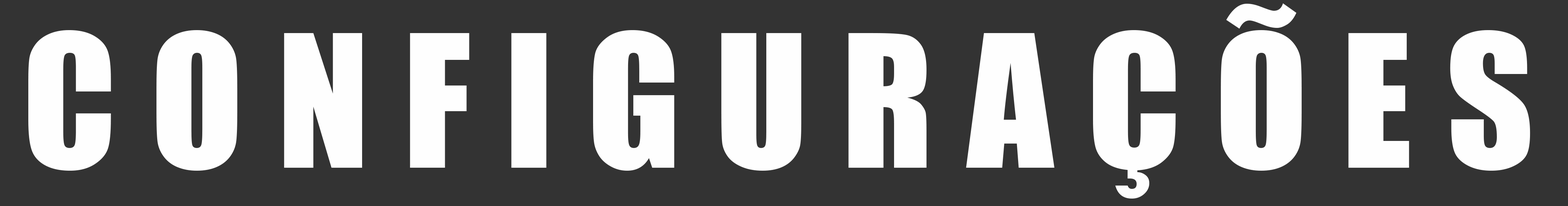
<style>
.page{position:relative;width:1568px;height:206px;background:#333333}
.page>*{position:absolute;margin:0}
.t1{font:170.6px "Impact";letter-spacing:0.2em;color:#fefefe;text-transform:uppercase}
</style>
<div class="page">
<p class="t1" style="left:28px;top:3px;width:1502px;height:196px">configurações</p>
</div>
